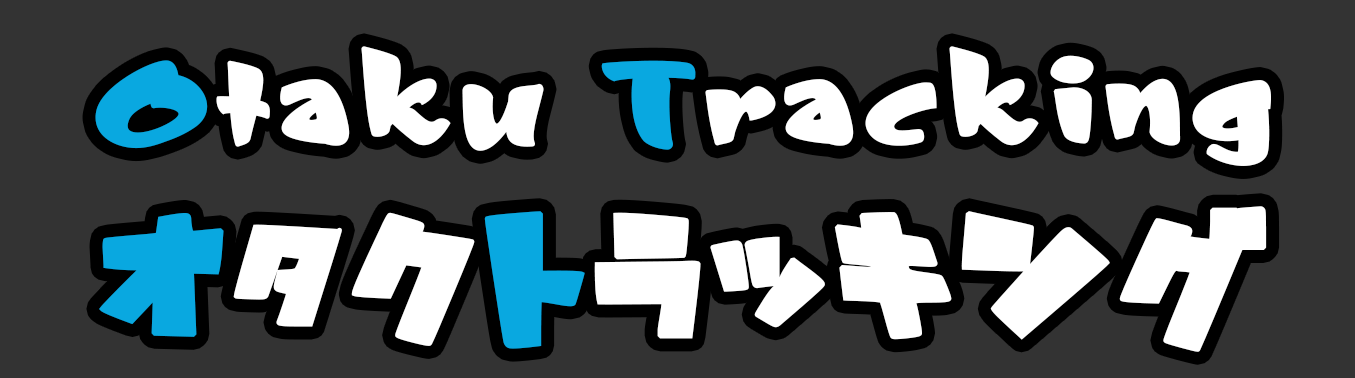
<style>
.page{position:relative;width:1355px;height:378px;background:#333333}
.page>*{position:absolute;margin:0}
.t1{font:125px "JoeMaxRegular";color:#ffffff;font-weight:bold}
.t2{font:125px "JoeMaxRegular";color:#09a8e0;font-weight:bold}
.t3{font:175px "tBo";color:#ffffff;font-weight:bold}
.t4{font:175px "tBo";color:#09a8e0;font-weight:bold}
</style>
<div class="page">
<p class="t1" style="left:95px;top:46px;width:1176px;height:120px"><span class="t2">O</span>taku <span class="t2">T</span>racking</p>
<p class="t3" style="left:99px;top:206px;width:1168px;height:146px"><span class="t4">オ</span>タク<span class="t4">ト</span>ラッキング</p>
</div>
